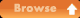
<style>
.page{position:relative;width:80px;height:18px;background:#e2732e}
.page>*{position:absolute;margin:0}
.t1{font:12px "Aharoni-Bold";color:#f4c699}
</style>
<div class="page">
<p class="t1" style="left:14px;top:3px;width:43px;height:9px">Browse</p>
</div>
